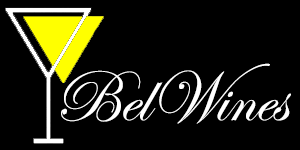
<style>
.page{position:relative;width:300px;height:150px;background:#000000}
.page>*{position:absolute;margin:0}
.t1{font:73.9px "EdwardianScriptITC";color:#ffffff;scale:0.97 1}
</style>
<div class="page">
<p class="t1" style="left:61px;top:63px;width:230px;height:61px">BelWines</p>
</div>
